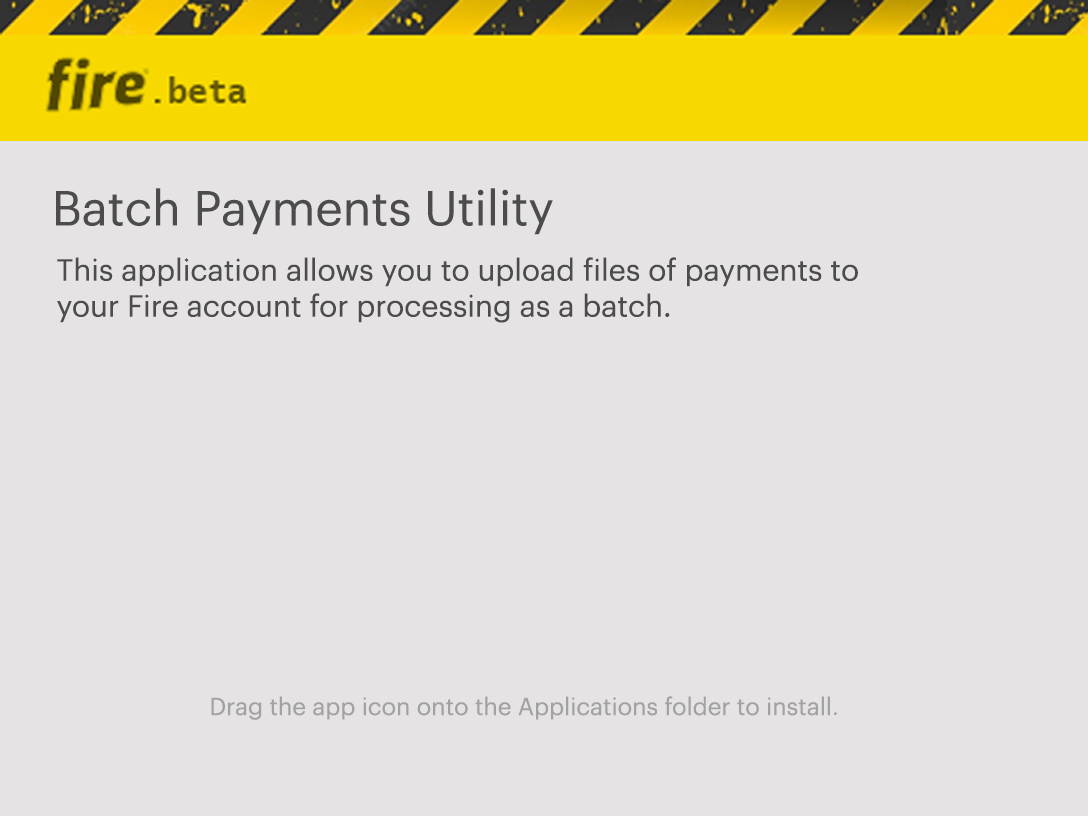
<style>
.page{position:relative;width:1088px;height:816px;background:#e5e3e3}
.page>*{position:absolute;margin:0}
.t1{font:48px "Graphik-Regular";color:#4d4c4c}
.t2{font:30px "Graphik-Regular";color:#4d4c4c}
.t3{font:24px "Graphik-Regular";color:#a3a2a2}
</style>
<div class="page">
<p class="t1" style="left:56px;top:188px;width:497px;height:47px">Batch Payments Utility</p>
<p class="t2" style="left:57px;top:257px;width:801px;height:66px">This application allows you to upload files of payments to your Fire account for processing as a batch.</p>
<p class="t3" style="left:211px;top:696px;width:626px;height:24px">Drag the app icon onto the Applications folder to install.</p>
</div>
